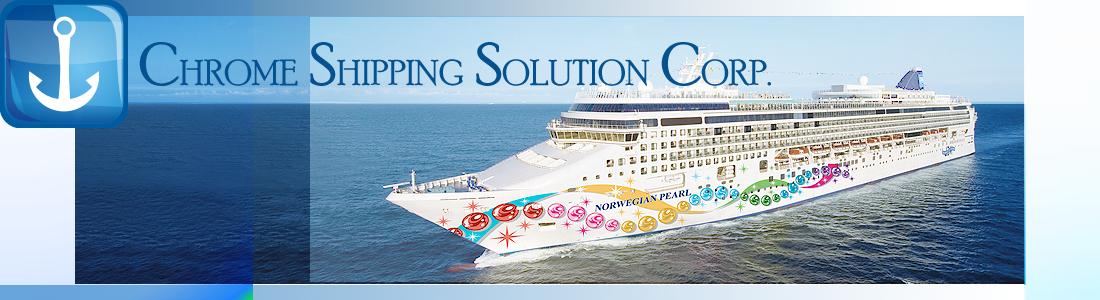
<style>
.page{position:relative;width:1100px;height:300px}
.page>*{position:absolute;margin:0}
.t1{font:36px "PoorRichard-Regular";color:#055290}
.t2{font:60px "PoorRichard-Regular";color:#055290}
</style>
<div class="page">
<p class="t1" style="left:139px;top:42px;width:632px;height:44px"><span class="t2">C</span>HROME  <span class="t2">S</span>HIPPING  <span class="t2">S</span>OLUTION  <span class="t2">C</span>ORP.</p>
</div>
